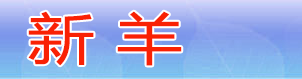
<style>
.page{position:relative;width:302px;height:79px}
.page>*{position:absolute;margin:0}
.t1{font:55px "MicrosoftYaHeiUI";color:#f92104;font-weight:bold;scale:1.2 1}
</style>
<div class="page">
<p class="t1" style="left:28px;top:11px;width:154px;height:55px">新 羊</p>
</div>
